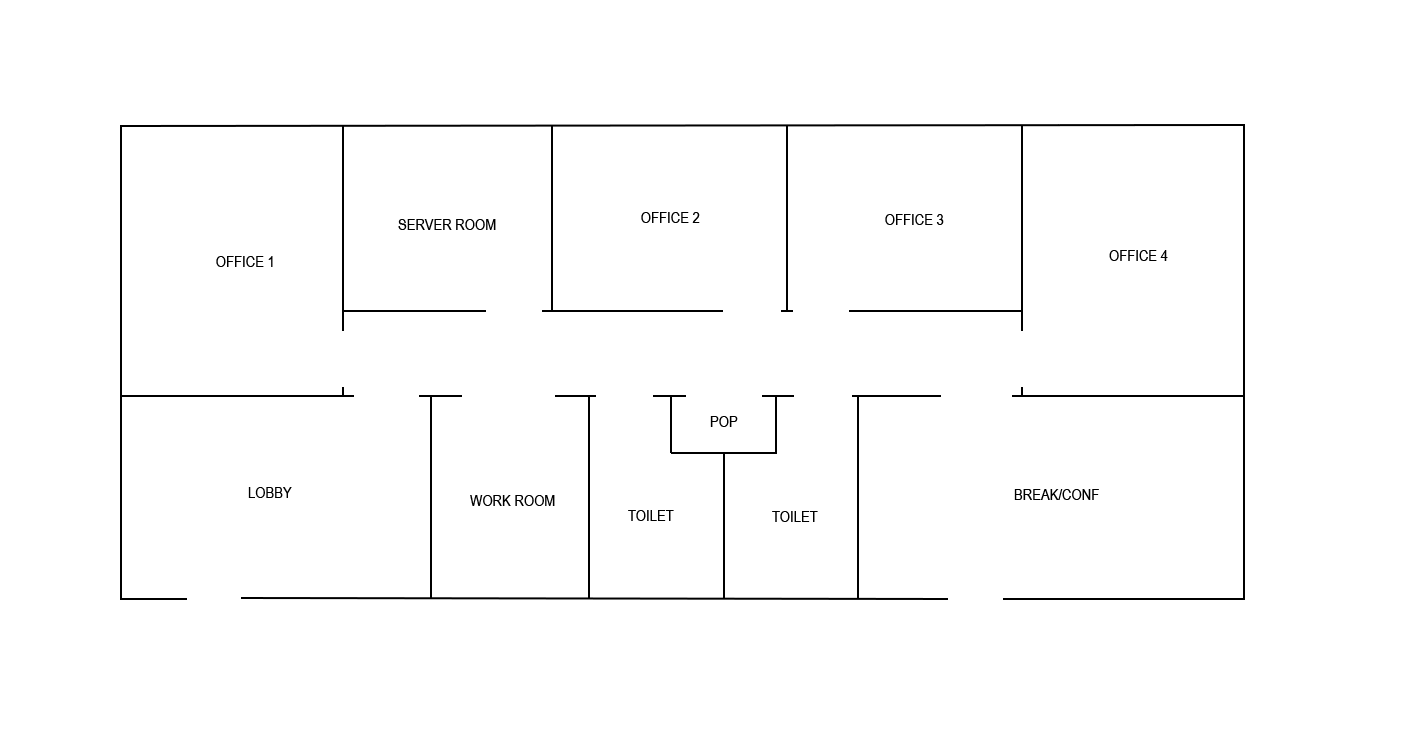
<style>
.page{position:relative;width:1424px;height:752px;background:#ffffff}
.page>*{position:absolute;margin:0}
.t1{font:16px "ArialNarrow";color:#000000}
</style>
<div class="page">
<p class="t1" style="left:398px;top:219px;width:98px;height:11px">SERVER ROOM</p>
<p class="t1" style="left:641px;top:212px;width:59px;height:11px">OFFICE 2</p>
<p class="t1" style="left:885px;top:214px;width:59px;height:11px">OFFICE 3</p>
<p class="t1" style="left:216px;top:256px;width:57px;height:11px">OFFICE 1</p>
<p class="t1" style="left:1109px;top:250px;width:59px;height:11px">OFFICE 4</p>
<p class="t1" style="left:710px;top:416px;width:28px;height:11px">POP</p>
<p class="t1" style="left:248px;top:487px;width:44px;height:11px">LOBBY</p>
<p class="t1" style="left:470px;top:495px;width:85px;height:11px">WORK ROOM</p>
<p class="t1" style="left:1014px;top:489px;width:85px;height:11px">BREAK/CONF</p>
<p class="t1" style="left:628px;top:510px;width:46px;height:11px">TOILET</p>
<p class="t1" style="left:772px;top:511px;width:46px;height:11px">TOILET</p>
</div>
